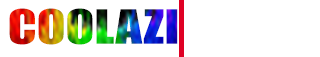
<style>
.page{position:relative;width:320px;height:57px;background:#ffffff}
.page>*{position:absolute;margin:0}
.t1{font:43.7px "Impact";text-transform:uppercase;scale:1.2 1}
</style>
<div class="page">
<p class="t1" style="left:9px;top:8px;width:169px;height:37px">coolazi</p>
</div>
